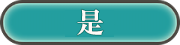
<style>
.page{position:relative;width:180px;height:45px;background:#239e9f}
.page>*{position:absolute;margin:0}
.t1{font:28px "RyuminPr6N-ExBold";color:#fff9f6}
</style>
<div class="page">
<p class="t1" style="left:77px;top:9px;width:27px;height:27px">是</p>
</div>
